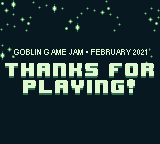
<style>
.page{position:relative;width:160px;height:144px;background:#071821}
.page>*{position:absolute;margin:0}
.t1{font:9px "ArialNarrow";color:#e0f8cf;text-transform:uppercase}
.t2{font:16px/11px "8BITWONDERNominal";color:#e0f8cf;text-transform:uppercase}
.t3{font:16px/4px "8BITWONDERNominal";color:#e0f8cf;text-transform:uppercase}
.t4{font:14px/4px "PokemonGB";color:#e0f8cf;text-transform:uppercase}
</style>
<div class="page">
<p class="t1" style="left:14px;top:49px;width:133px;height:6px">goblin game jam • february 2021</p>
<p class="t2" style="left:5px;top:63px;width:149px;height:30px;text-align:center">thanks for<br><span class="t3">playing</span><span class="t4">!</span></p>
</div>
